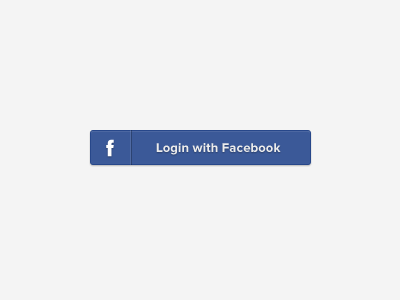
<style>
.page{position:relative;width:400px;height:300px;background:#f4f4f4}
.page>*{position:absolute;margin:0}
.t1{font:13px "ProximaNova-Bold";letter-spacing:0.01em;color:#ececec}
</style>
<div class="page">
<p class="t1" style="left:156px;top:143px;width:125px;height:12px">Login with Facebook</p>
</div>
